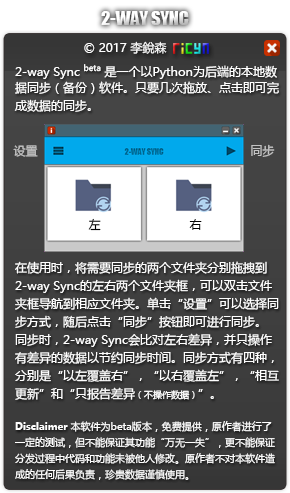
<style>
.page{position:relative;width:290px;height:493px}
.page>*{position:absolute;margin:0}
.t1{font:18px "Impact";color:#ffffff}
.t2{font:12px "MicrosoftYaHei";color:#ffffff}
.t3{font:12px/18px "MicrosoftYaHei";color:#ffffff}
.t4{font:14px/18px "MicrosoftYaHei";color:#ffffff}
.t5{font:9px/18px "MicrosoftYaHei";color:#ffffff}
.t6{font:10px/16px "MicrosoftYaHei-Bold";color:#ffffff}
.t7{font:10px/16px "MicrosoftYaHei";color:#ffffff}
.t8{font:12px "MicrosoftYaHei";color:#c4c4c4}
.t9{font:12px "MicrosoftYaHei";color:#010101}
</style>
<div class="page">
<p class="t1" style="left:101px;top:11px;width:88px;height:14px">2-WAY SYNC</p>
<p class="t2" style="left:84px;top:41px;width:83px;height:13px">© 2017 李銳森</p>
<p class="t3" style="left:14px;top:64px;width:265px;height:416px">2-way Sync <span class="t4">beta</span> 是一个以Python为后端的本地数据同步（备份）软件。只要几次拖放、点击即可完成数据的同步。<br><br><br><br><br><br><br><br><br>在使用时，将需要同步的两个文件夹分别拖拽到2-way Sync的左右两个文件夹框，可以双击文件夹框导航到相应文件夹。单击“设置”可以选择同步方式，随后点击“同步”按钮即可进行同步。<br>同步时，2-way Sync会比对左右差异，并只操作有差异的数据以节约同步时间。同步方式有四种，分别是“以左覆盖右”，“以右覆盖左”，“相互更新”和“只报告差异<span class="t5">（不操作数据）</span>”。<br><br><span class="t6">Disclaimer</span><span class="t7"> 本软件为beta版本，免费提供，原作者进行了一定的测试，但不能保证其功能“万无一失”，更不能保证分发过程中代码和功能未被他人修改。原作者不对本软件造成的任何后果负责，珍贵数据谨慎使用。</span></p>
<p class="t8" style="left:13px;top:144px;width:262px;height:13px">设置                                                            同步</p>
<p class="t9" style="left:88px;top:218px;width:114px;height:13px">左                         右</p>
</div>
